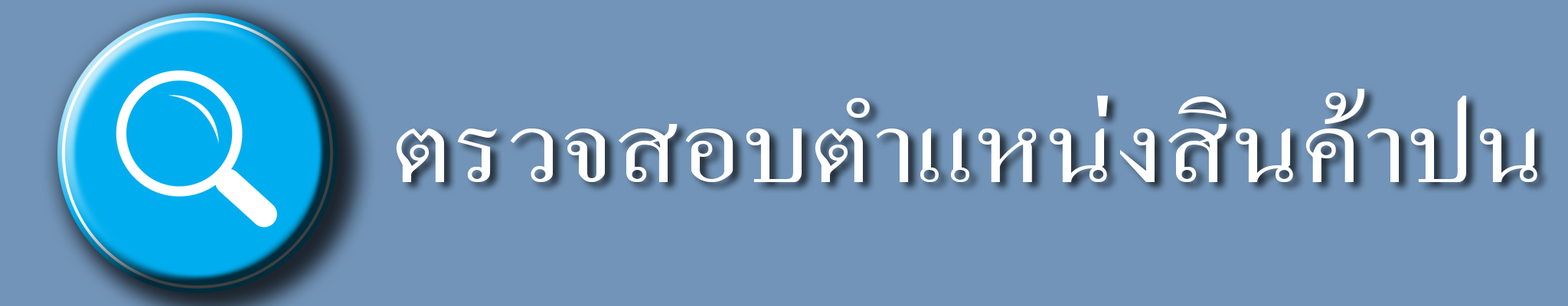
<style>
.page{position:relative;width:1568px;height:306px;background:#7194b8}
.page>*{position:absolute;margin:0}
.t1{font:133.7px "AngsanaNew";color:#ffffff;scale:1.15 1}
</style>
<div class="page">
<p class="t1" style="left:396px;top:89px;width:1141px;height:93px">ตรวจสอบตำแหน่งสินค้าปน</p>
</div>
